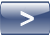
<style>
.page{position:relative;width:50px;height:35px}
.page>*{position:absolute;margin:0}
.t1{font:32px "Calibri-Bold";color:#f8fafc}
</style>
<div class="page">
<p class="t1" style="left:20px;top:11px;width:14px;height:15px">&gt;</p>
</div>
